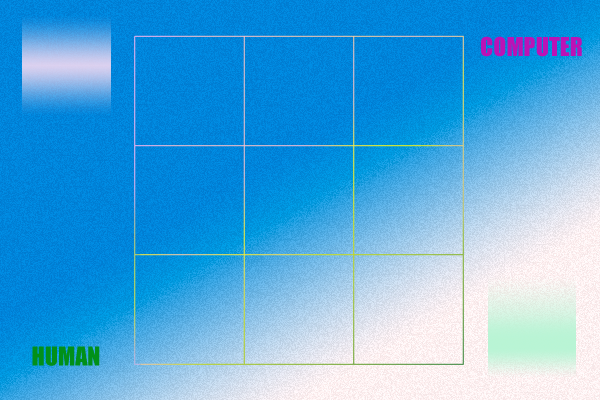
<style>
.page{position:relative;width:600px;height:400px}
.page>*{position:absolute;margin:0}
.t1{font:24px "Impact";color:#bc12b6}
.t2{font:24px "Impact";color:#019019}
</style>
<div class="page">
<p class="t1" style="left:481px;top:36px;width:101px;height:21px">COMPUTER</p>
<p class="t2" style="left:32px;top:346px;width:68px;height:20px">HUMAN</p>
</div>
